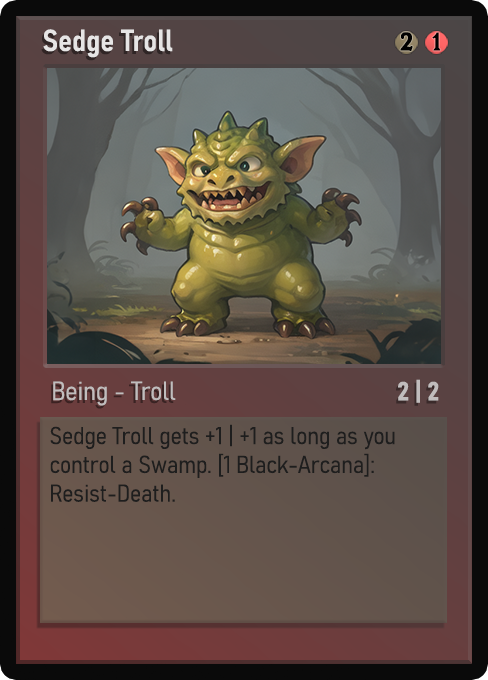
<style>
.page{position:relative;width:488px;height:680px}
.page>*{position:absolute;margin:0}
.t1{font:30px "Bahnschrift-SemiBoldSemiCondensed";color:#f2f2f2;font-weight:bold}
.t2{font:25px "WTRRoycroft";color:#000000;font-weight:bold;scale:1.09 1}
.t3{font:26px "Bahnschrift-LightSemiCondensed";color:#c8c8c8;font-weight:bold}
.t4{font:26px "Bahnschrift-BoldSemiCondensed";color:#c1bdbd;font-weight:bold}
.t5{font:24px "Bahnschrift-LightSemiCondensed";color:#1e1e1e;font-weight:bold}
</style>
<div class="page">
<p class="t1" style="left:43px;top:29px;width:130px;height:29px;opacity:0.9">Sedge Troll</p>
<p class="t2" style="left:400px;top:32px;width:13px;height:19px">2</p>
<p class="t2" style="left:432px;top:32px;width:9px;height:19px">1</p>
<p class="t3" style="left:53px;top:381px;width:123px;height:25px;opacity:0.9">Being - Troll</p>
<p class="t4" style="left:398px;top:379px;width:41px;height:24px">2 | 2</p>
<p class="t5" style="left:50px;top:424px;width:345px;height:78px">Sedge Troll gets +1 | +1 as long as you control a Swamp. [1 Black-Arcana]: Resist-Death.</p>
</div>
